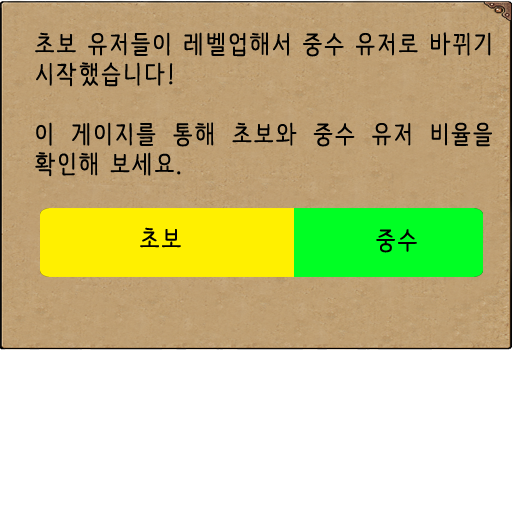
<style>
.page{position:relative;width:512px;height:512px;background:#ffffff}
.page>*{position:absolute;margin:0}
.t1{font:25px "NanumBarunpen";letter-spacing:0.075em;color:#000000;font-weight:bold}
</style>
<div class="page">
<p class="t1" style="left:35px;top:32px;width:457px;height:145px;text-align:justify">초보 유저들이 레벨업해서 중수 유저로 바뀌기 시작했습니다!<br><br>이 게이지를 통해 초보와 중수 유저 비율을 확인해 보세요.</p>
<p class="t1" style="left:140px;top:227px;width:41px;height:21px">초보</p>
<p class="t1" style="left:376px;top:229px;width:41px;height:24px">중수</p>
</div>
